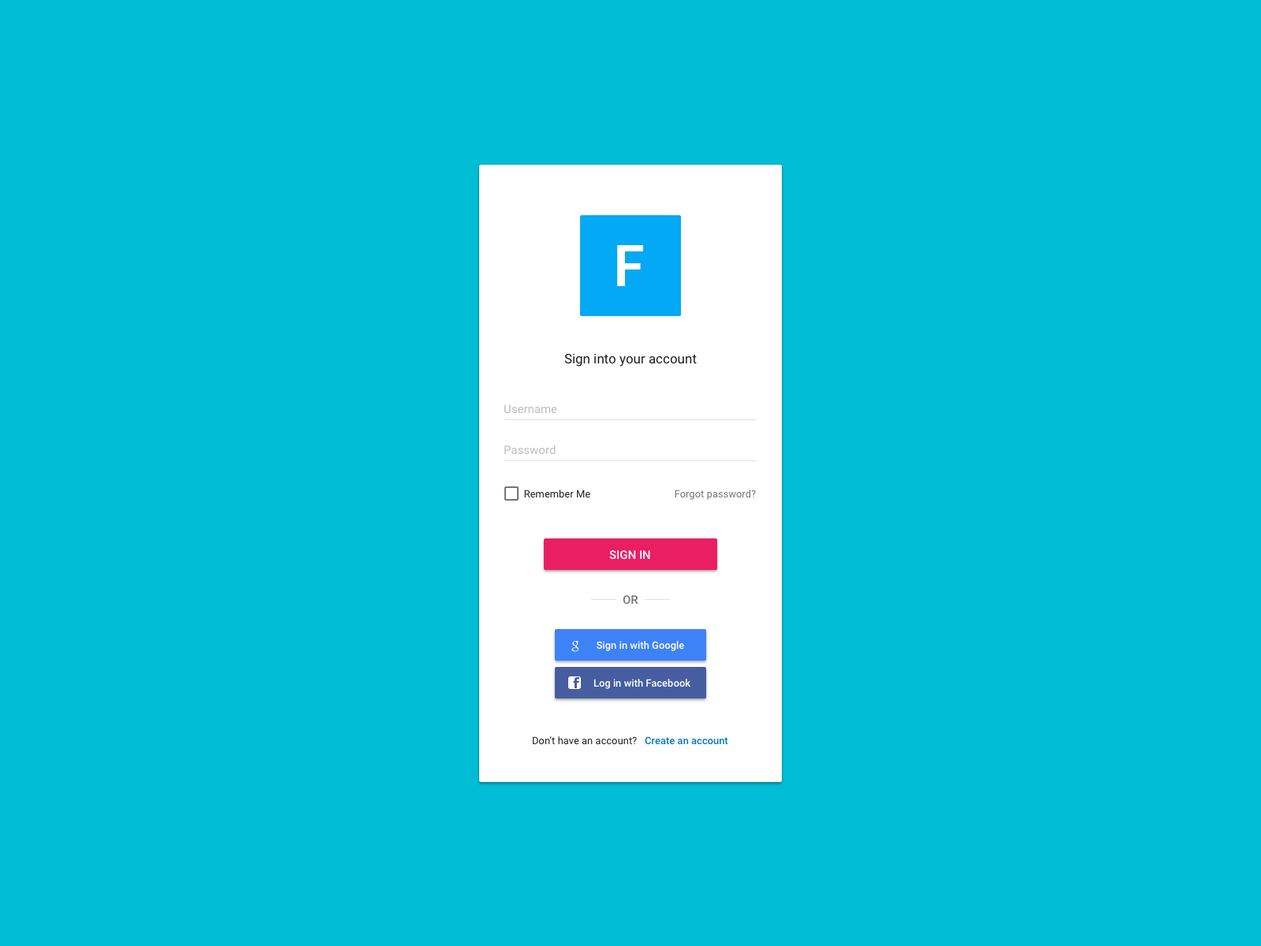
<style>
.page{position:relative;width:1261px;height:946px;background:#00bcd4}
.page>*{position:absolute;margin:0}
.t1{font:56.7px "Lato-Bold";color:#ffffff}
.t2{font:13.4px "Roboto-Regular";color:#212121}
.t3{font:11.8px "Roboto-Regular";color:#bdbdbd}
.t4{font:10.2px "Roboto-Regular";color:#212121}
.t5{font:10.2px "Roboto-Regular";color:#757575}
.t6{font:11.8px "Roboto-Medium";color:#ffffff}
.t7{font:11.8px "Roboto-Medium";color:#757575}
.t8{font:10.2px "Roboto-Medium";color:#ffffff}
.t9{font:10.2px "Roboto-Medium";color:#0277bd}
</style>
<div class="page">
<p class="t1" style="left:617px;top:245px;width:26px;height:41px">F</p>
<p class="t2" style="left:564px;top:353px;width:133px;height:13px">Sign into your account</p>
<p class="t3" style="left:504px;top:404px;width:53px;height:10px">Username</p>
<p class="t3" style="left:504px;top:444px;width:52px;height:11px">Password</p>
<p class="t4" style="left:524px;top:489px;width:66px;height:9px">Remember Me</p>
<p class="t5" style="left:675px;top:489px;width:81px;height:11px">Forgot password?</p>
<p class="t6" style="left:609px;top:550px;width:41px;height:10px">SIGN IN</p>
<p class="t7" style="left:623px;top:595px;width:15px;height:9px">OR</p>
<p class="t8" style="left:597px;top:641px;width:87px;height:10px">Sign in with Google</p>
<p class="t8" style="left:593px;top:679px;width:97px;height:10px">Log in with Facebook</p>
<p class="t4" style="left:533px;top:736px;width:104px;height:9px">Don’t have an account?</p>
<p class="t9" style="left:645px;top:736px;width:83px;height:9px">Create an account</p>
</div>
